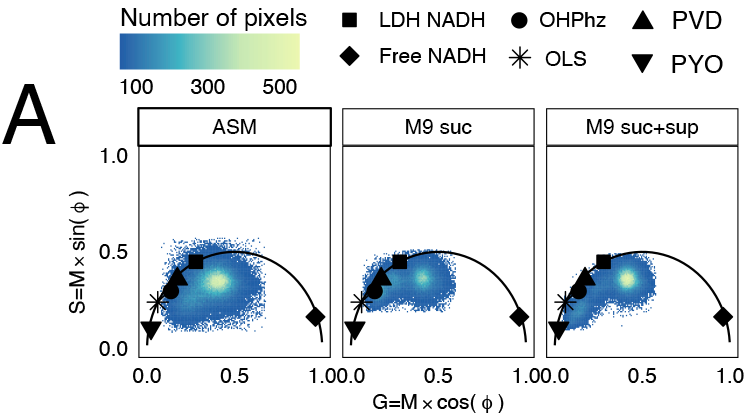
<style>
.page{position:relative;width:749px;height:419px;background:#ffffff}
.page>*{position:absolute;margin:0}
.t1{font:25px "MyriadPro-Regular";color:#000000}
.t2{font:20.8px "Helvetica";color:#000000}
.t3{font:83.3px "Helvetica";color:#000000}
.t4{font:20.8px "Helvetica";letter-spacing:2.813em;color:#000000}
.t5{font:20.8px "Helvetica";letter-spacing:-0.013em;color:#000000}
.t6{font:20.8px "Helvetica";letter-spacing:2.814em;color:#000000}
</style>
<div class="page">
<p class="t1" style="left:121px;top:8px;width:186px;height:23px">Number of pixels</p>
<p class="t2" style="left:380px;top:12px;width:105px;height:15px">LDH NADH</p>
<p class="t2" style="left:540px;top:12px;width:66px;height:15px">OHPhz</p>
<p class="t1" style="left:673px;top:11px;width:49px;height:18px">PVD</p>
<p class="t2" style="left:380px;top:48px;width:106px;height:15px">Free NADH</p>
<p class="t2" style="left:545px;top:51px;width:41px;height:15px">OLS</p>
<p class="t1" style="left:672px;top:55px;width:51px;height:18px">PYO</p>
<p class="t3" style="left:2px;top:84px;width:54px;height:60px">A</p>
<p class="t2" style="left:120px;top:79px;width:33px;height:15px">100</p>
<p class="t2" style="left:191px;top:79px;width:34px;height:15px">300</p>
<p class="t2" style="left:263px;top:79px;width:34px;height:15px">500</p>
<p class="t2" style="left:212px;top:119px;width:44px;height:15px">ASM</p>
<p class="t2" style="left:406px;top:119px;width:66px;height:15px">M9 suc</p>
<p class="t2" style="left:587px;top:119px;width:112px;height:19px">M9 suc+sup</p>
<p class="t2" style="left:100px;top:148px;width:15px;height:15px">1.</p>
<p class="t2" style="left:117px;top:148px;width:11px;height:15px">0</p>
<p class="t2" style="left:68px;top:191px;width:21px;height:6px">)</p>
<p class="t2" style="left:68px;top:219px;width:21px;height:32px">sin(</p>
<p class="t2" style="left:99px;top:244px;width:16px;height:15px">0.</p>
<p class="t2" style="left:117px;top:244px;width:11px;height:15px">5</p>
<p class="t2" style="left:68px;top:271px;width:17px;height:43px">S=M</p>
<p class="t2" style="left:99px;top:341px;width:16px;height:15px">0.</p>
<p class="t2" style="left:117px;top:341px;width:11px;height:15px">0</p>
<p class="t2" style="left:133px;top:368px;width:16px;height:15px">0.</p>
<p class="t4" style="left:150px;top:368px;width:82px;height:15px">00</p>
<p class="t2" style="left:233px;top:368px;width:16px;height:15px">.5</p>
<p class="t2" style="left:309px;top:368px;width:15px;height:15px">1.</p>
<p class="t5" style="left:325px;top:368px;width:23px;height:15px">00</p>
<p class="t2" style="left:349px;top:368px;width:16px;height:15px">.0</p>
<p class="t2" style="left:424px;top:368px;width:16px;height:15px">0.</p>
<p class="t6" style="left:441px;top:368px;width:78px;height:15px">51</p>
<p class="t2" style="left:524px;top:368px;width:16px;height:15px">.0</p>
<p class="t2" style="left:540px;top:368px;width:16px;height:15px">0.</p>
<p class="t6" style="left:558px;top:368px;width:81px;height:15px">00</p>
<p class="t2" style="left:641px;top:368px;width:16px;height:15px">.5</p>
<p class="t2" style="left:717px;top:368px;width:14px;height:15px">1.</p>
<p class="t2" style="left:733px;top:368px;width:11px;height:15px">0</p>
<p class="t2" style="left:373px;top:394px;width:44px;height:15px">G=M</p>
<p class="t2" style="left:437px;top:394px;width:39px;height:19px">cos(</p>
<p class="t2" style="left:498px;top:394px;width:6px;height:19px">)</p>
</div>
